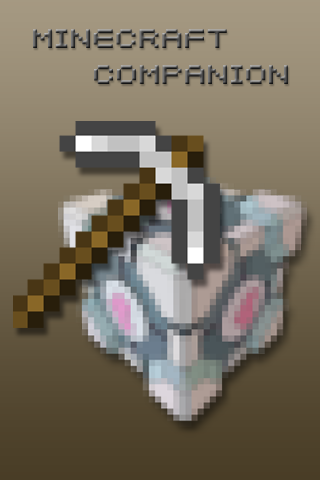
<style>
.page{position:relative;width:320px;height:480px}
.page>*{position:absolute;margin:0}
.t1{font:30px "04b21";letter-spacing:0.01em}
</style>
<div class="page">
<p class="t1" style="left:33px;top:29px;width:255px;height:55px">MINECRAFT<br>    COMPANION</p>
</div>
